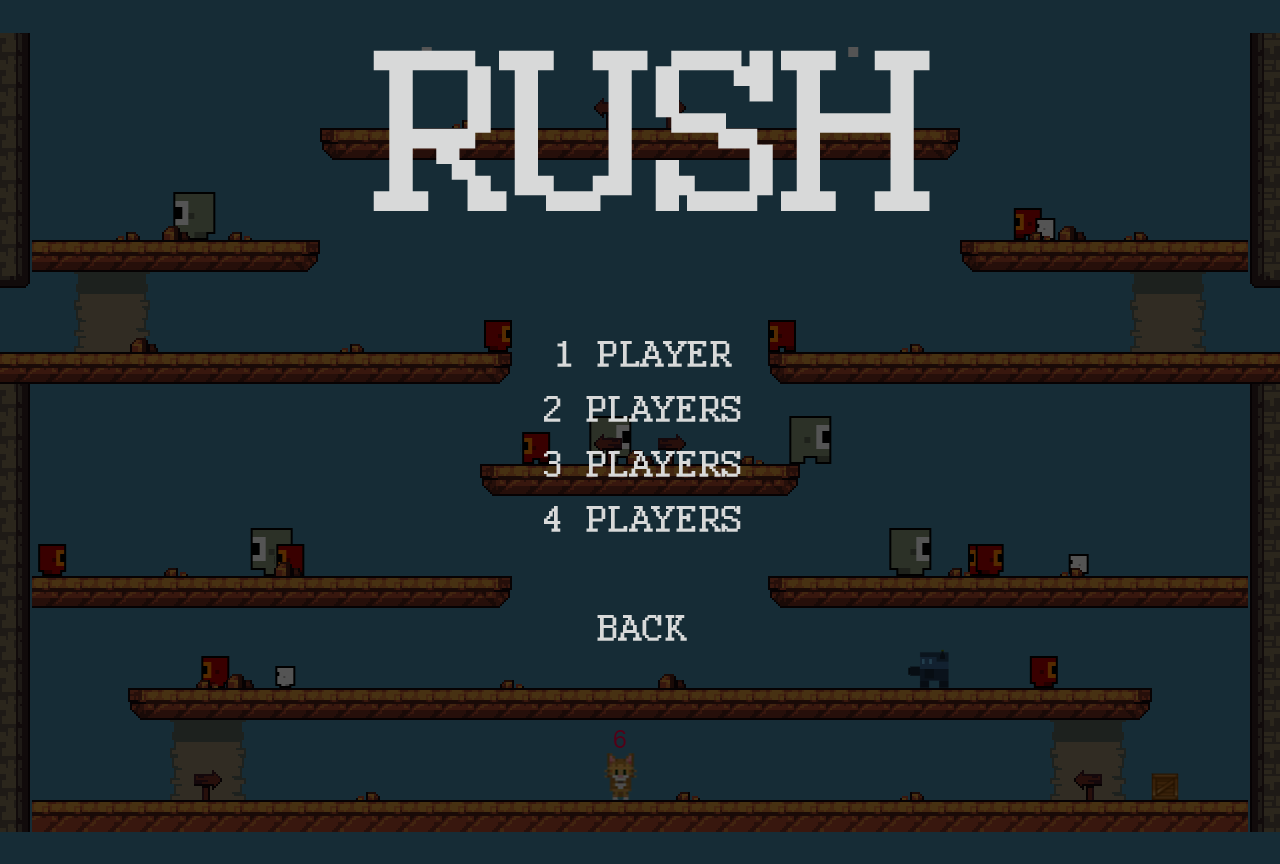
<style>
.page{position:relative;width:1280px;height:864px;background:#162c36}
.page>*{position:absolute;margin:0}
.t1{font:250px "Courier";color:#d8d9d9;font-weight:bold}
.t2{font:40px "Courier";color:#d8d9d9;text-transform:uppercase;font-weight:bold}
</style>
<div class="page">
<p class="t1" style="left:373px;top:50px;width:557px;height:161px">RUSH</p>
<p class="t2" style="left:557px;top:341px;width:175px;height:26px">1 player</p>
<p class="t2" style="left:544px;top:396px;width:197px;height:26px">2 players</p>
<p class="t2" style="left:544px;top:451px;width:197px;height:26px">3 players</p>
<p class="t2" style="left:544px;top:506px;width:197px;height:26px">4 players</p>
<p class="t2" style="left:597px;top:615px;width:90px;height:26px">Back</p>
</div>
